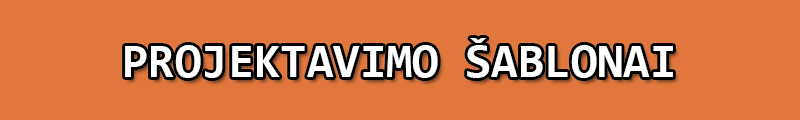
<style>
.page{position:relative;width:800px;height:120px;background:#e2773d}
.page>*{position:absolute;margin:0}
.t1{font:48px "Consolas-Bold";color:#ffffff}
</style>
<div class="page">
<p class="t1" style="left:125px;top:38px;width:548px;height:40px">PROJEKTAVIMO ŠABLONAI</p>
</div>
